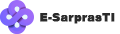
<style>
.page{position:relative;width:120px;height:34px;background:#ffffff}
.page>*{position:absolute;margin:0}
.t1{font:11.2px "Arial-Black";color:#2b2b2b;font-weight:bold}
</style>
<div class="page">
<p class="t1" style="left:40px;top:13px;width:75px;height:11px">E-SarprasTI</p>
</div>
